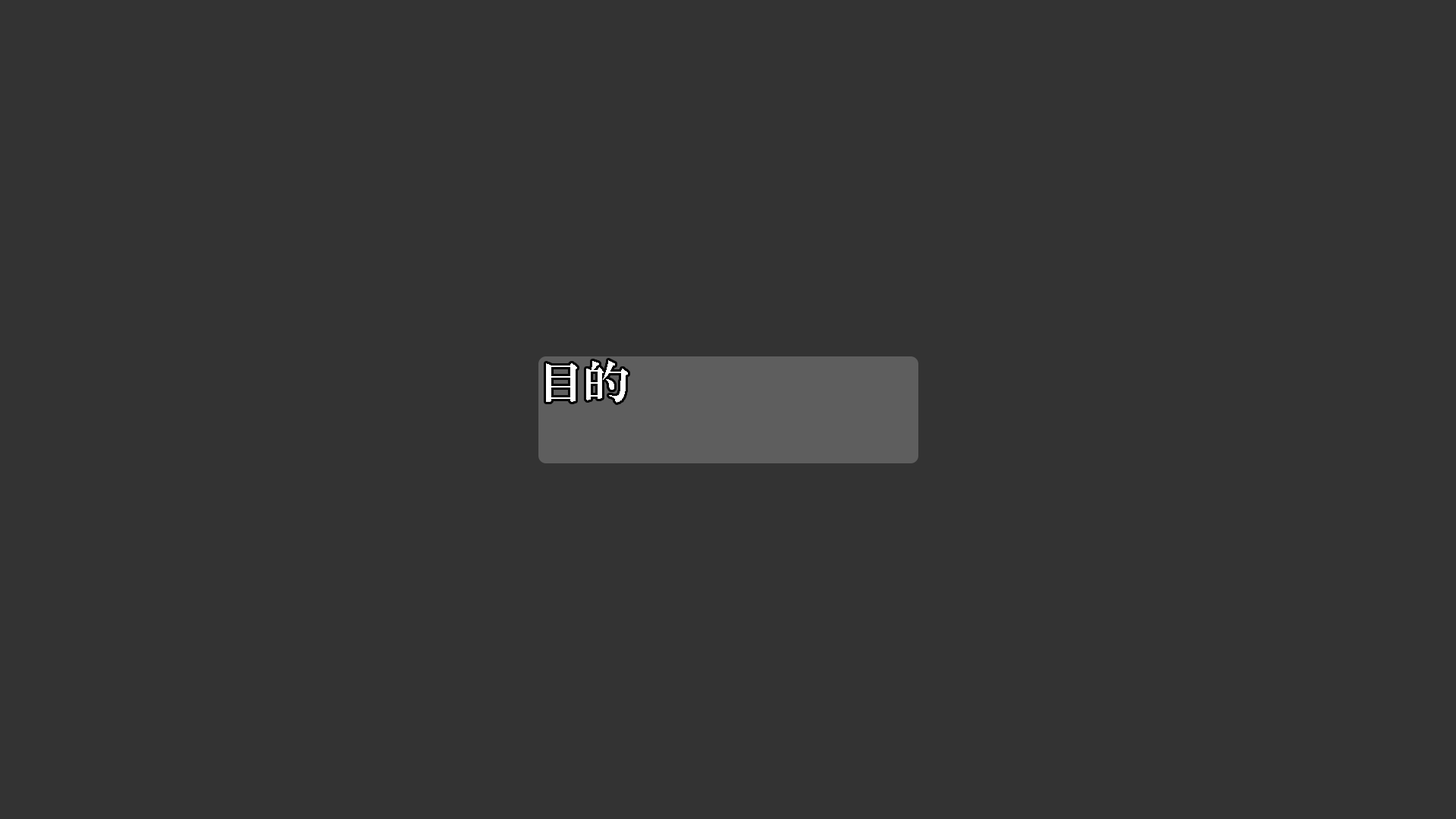
<style>
.page{position:relative;width:1456px;height:819px;background:#333333}
.page>*{position:absolute;margin:0}
.t1{font:45.5px "HGMinchoE";color:#ffffff}
</style>
<div class="page">
<p class="t1" style="left:546px;top:360px;width:82px;height:43px">目的</p>
</div>
